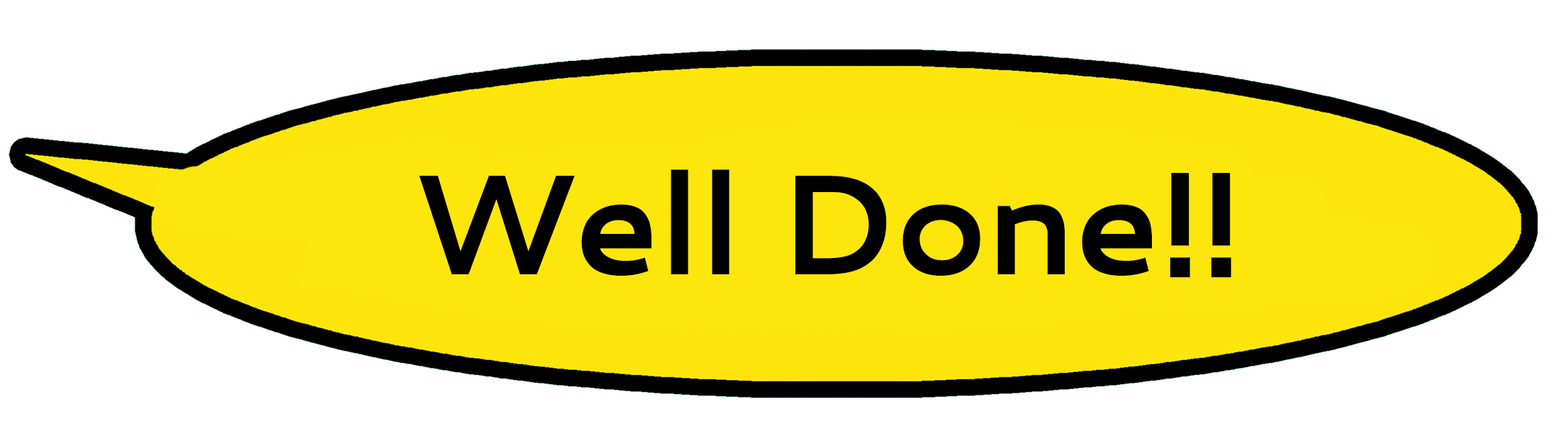
<style>
.page{position:relative;width:1568px;height:421px;background:#ffffff}
.page>*{position:absolute;margin:0}
.t1{font:141.8px "Cantarell-Bold";letter-spacing:-0.025em;color:#000000}
</style>
<div class="page">
<p class="t1" style="left:419px;top:169px;width:812px;height:109px">Well Done!!</p>
</div>
